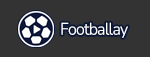
<style>
.page{position:relative;width:150px;height:57px;background:#333333}
.page>*{position:absolute;margin:0}
.t1{font:16.9px "NunitoSans-Regular";letter-spacing:-0.05em;color:#ffffff;font-weight:bold;scale:0.94 1}
</style>
<div class="page">
<p class="t1" style="left:61px;top:22px;width:67px;height:16px">Footballay</p>
</div>
